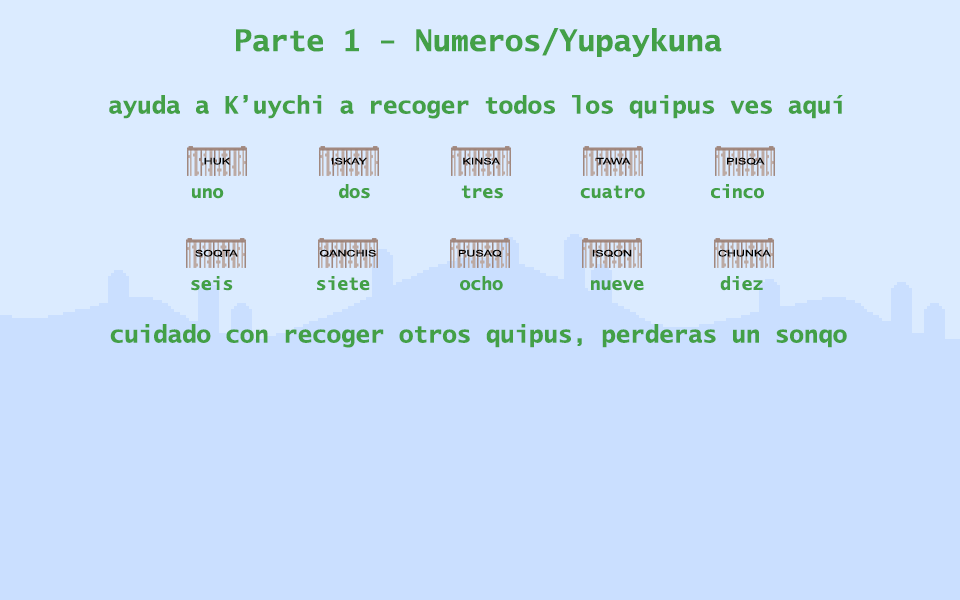
<style>
.page{position:relative;width:960px;height:600px;background:#cadfff}
.page>*{position:absolute;margin:0}
.t1{font:30px "LucidaSans-TypewriterBold";color:#43a047}
.t2{font:24px "LucidaSans-TypewriterBold";color:#43a047}
.t3{font:18px "LucidaSans-TypewriterBold";color:#43a047}
</style>
<div class="page">
<p class="t1" style="left:236px;top:28px;width:486px;height:29px">Parte 1 - Numeros/Yupaykuna</p>
<p class="t2" style="left:109px;top:95px;width:734px;height:24px">ayuda a K’uychi a recoger todos los quipus ves aquí</p>
<p class="t3" style="left:192px;top:184px;width:572px;height:15px">uno      dos    tres       cuatro      cinco</p>
<p class="t3" style="left:191px;top:276px;width:572px;height:15px">seis    siete    ocho        nueve       diez</p>
<p class="t2" style="left:110px;top:324px;width:737px;height:24px">cuidado con recoger otros quipus, perderas un sonqo</p>
</div>
